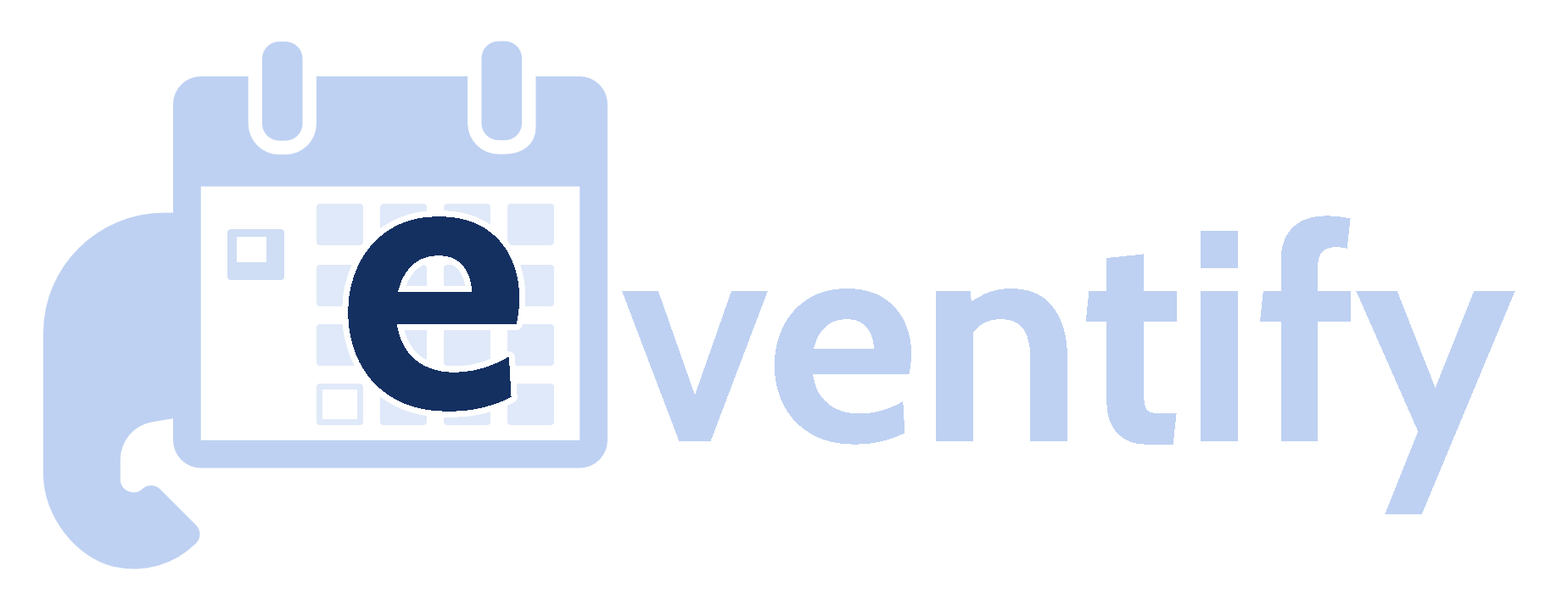
<style>
.page{position:relative;width:1568px;height:611px;background:#ffffff}
.page>*{position:absolute;margin:0}
.t1{font:374.1px "Cabin-Bold";letter-spacing:-0.08em;color:#143061}
.t2{font:300.4px "Cabin-Bold";color:#bed1f2}
</style>
<div class="page">
<p class="t1" style="left:348px;top:216px;width:171px;height:196px">e</p>
<p class="t2" style="left:622px;top:216px;width:729px;height:229px">ventif</p>
<p class="t2" style="left:1356px;top:291px;width:159px;height:223px">y</p>
</div>
